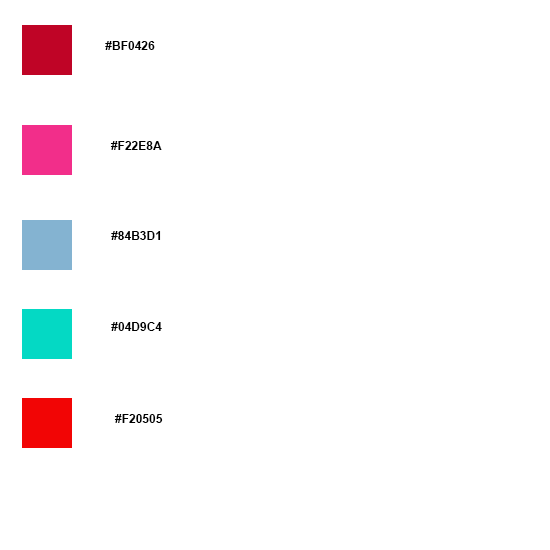
<style>
.page{position:relative;width:550px;height:550px;background:#ffffff}
.page>*{position:absolute;margin:0}
.t1{font:12px "Arial-BoldMT";color:#000000}
</style>
<div class="page">
<p class="t1" style="left:105px;top:41px;width:50px;height:9px">#BF0426</p>
<p class="t1" style="left:110px;top:141px;width:52px;height:9px">#F22E8A</p>
<p class="t1" style="left:111px;top:231px;width:50px;height:9px">#84B3D1</p>
<p class="t1" style="left:111px;top:322px;width:51px;height:9px">#04D9C4</p>
<p class="t1" style="left:114px;top:414px;width:49px;height:9px">#F20505</p>
</div>
